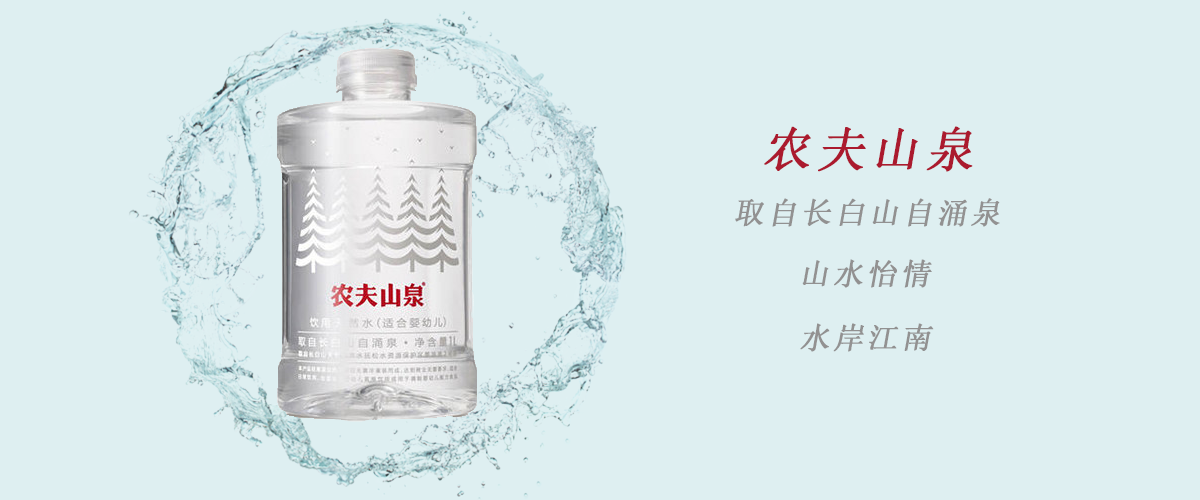
<style>
.page{position:relative;width:1200px;height:500px;background:#deeff1}
.page>*{position:absolute;margin:0}
.t1{font:48px "SimSun";letter-spacing:0.1em;color:#ac1a2e;text-transform:uppercase;font-weight:bold;font-style:italic}
.t2{font:30px "SimSun";letter-spacing:0.1em;color:#929191;text-transform:uppercase;font-weight:bold;font-style:italic}
</style>
<div class="page">
<p class="t1" style="left:764px;top:126px;width:209px;height:46px">农夫山泉</p>
<p class="t2" style="left:735px;top:198px;width:265px;height:29px">取自长白山自涌泉</p>
<p class="t2" style="left:802px;top:259px;width:130px;height:29px">山水怡情</p>
<p class="t2" style="left:800px;top:323px;width:134px;height:29px">水岸江南</p>
</div>
